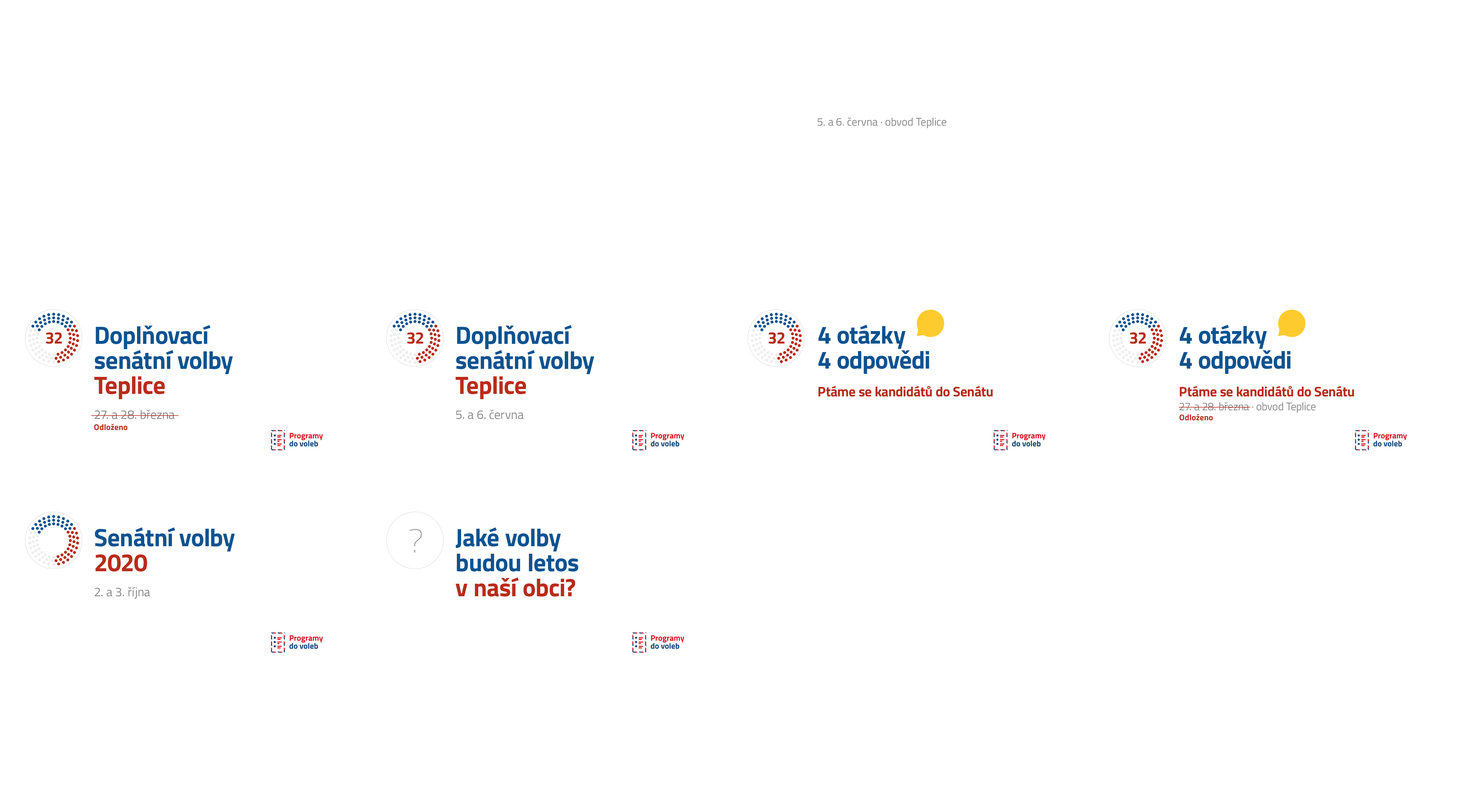
<style>
.page{position:relative;width:1472px;height:810px;background:#ffffff}
.page>*{position:absolute;margin:0}
.t1{font:11.1px "TitilliumWeb-Regular";color:#888888}
.t2{font:25px/25px "TitilliumWeb-Bold";color:#0c5391}
.t3{font:25px/25px "TitilliumWeb-Bold";color:#ba2b1a}
.t4{font:12.5px/25px "TitilliumWeb-Regular";color:#888888}
.t5{font:16.7px "TitilliumWeb-Bold";letter-spacing:-0.01em;color:#ba2b1a}
.t6{font:8.3px "TitilliumWeb-Bold";color:#ba2b1a}
.t7{font:33.4px "TitilliumWeb-Thin";letter-spacing:-0.01em;color:#aaaaaa}
</style>
<div class="page">
<p class="t1" style="left:818px;top:117px;width:128px;height:11px">5. a 6. června · obvod Teplice</p>
<p class="t2" style="left:94px;top:325px;width:139px;height:94px">Doplňovací<br>senátní volby<br><span class="t3">Teplice<br></span><span class="t4">27. a 28. března</span></p>
<p class="t2" style="left:456px;top:325px;width:138px;height:94px">Doplňovací<br>senátní volby<br><span class="t3">Teplice<br></span><span class="t4">5. a 6. června</span></p>
<p class="t5" style="left:46px;top:332px;width:16px;height:12px">32</p>
<p class="t5" style="left:407px;top:332px;width:16px;height:12px">32</p>
<p class="t5" style="left:769px;top:332px;width:16px;height:12px">32</p>
<p class="t5" style="left:1130px;top:332px;width:16px;height:12px">32</p>
<p class="t6" style="left:94px;top:424px;width:34px;height:6px">Odloženo</p>
<p class="t2" style="left:95px;top:527px;width:140px;height:72px">Senátní volby<br><span class="t3">2020<br></span><span class="t4">2. a 3. října</span></p>
<p class="t7" style="left:409px;top:529px;width:13px;height:24px">?</p>
<p class="t2" style="left:456px;top:527px;width:122px;height:70px">Jaké volby<br>budou letos<br><span class="t3">v naší obci?</span></p>
</div>
